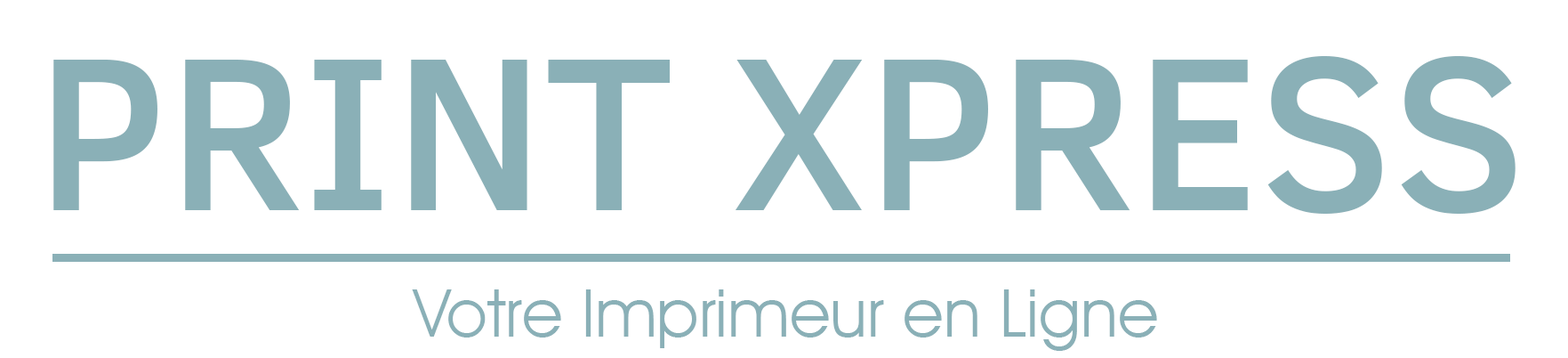
<style>
.page{position:relative;width:1568px;height:358px;background:#ffffff}
.page>*{position:absolute;margin:0}
.t1{font:222.3px "ClearSans-Medium";color:#8ab0b7}
.t2{font:66.7px "AvantGardeITCbyBT-Book";color:#8ab0b7}
</style>
<div class="page">
<p class="t1" style="left:53px;top:56px;width:1463px;height:157px">PRINT XPRESS</p>
<p class="t2" style="left:412px;top:289px;width:745px;height:61px">Votre Imprimeur en Ligne</p>
</div>
